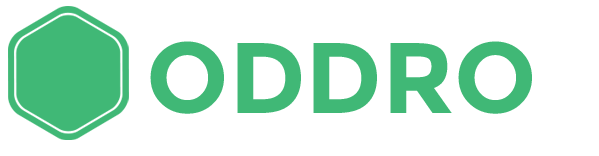
<style>
.page{position:relative;width:599px;height:156px;background:#ffffff}
.page>*{position:absolute;margin:0}
.t1{font:100px "Montserrat-Bold";color:#40b876}
</style>
<div class="page">
<p class="t1" style="left:150px;top:41px;width:382px;height:73px">ODDRO</p>
</div>
